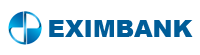
<style>
.page{position:relative;width:200px;height:55px;background:#ffffff}
.page>*{position:absolute;margin:0}
.t1{font:24px "Arial-Black";color:#005d98}
</style>
<div class="page">
<p class="t1" style="left:49px;top:20px;width:144px;height:17px">EXIMBANK</p>
</div>
